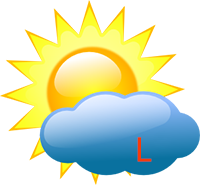
<style>
.page{position:relative;width:200px;height:185px;background:#ffffff}
.page>*{position:absolute;margin:0}
.t1{font:36px "MyriadPro-Regular";color:#f53b0c}
</style>
<div class="page">
<p class="t1" style="left:137px;top:137px;width:15px;height:25px">L</p>
</div>
